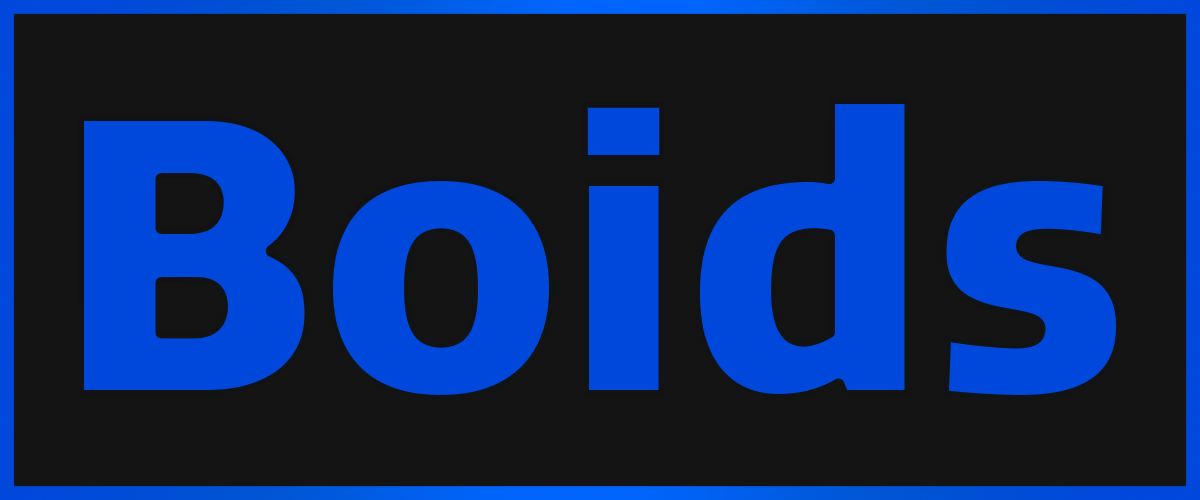
<style>
.page{position:relative;width:1200px;height:500px;background:#141414}
.page>*{position:absolute;margin:0}
.t1{font:387.5px "Quatro-Black";letter-spacing:0.01em;color:#0048db}
</style>
<div class="page">
<p class="t1" style="left:79px;top:99px;width:1042px;height:301px">Boids</p>
</div>
